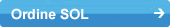
<style>
.page{position:relative;width:170px;height:27px;background:#378dcc}
.page>*{position:absolute;margin:0}
.t1{font:14px "Arial-BoldMT";color:#ffffff}
</style>
<div class="page">
<p class="t1" style="left:11px;top:8px;width:78px;height:12px">Ordine SOL</p>
</div>
